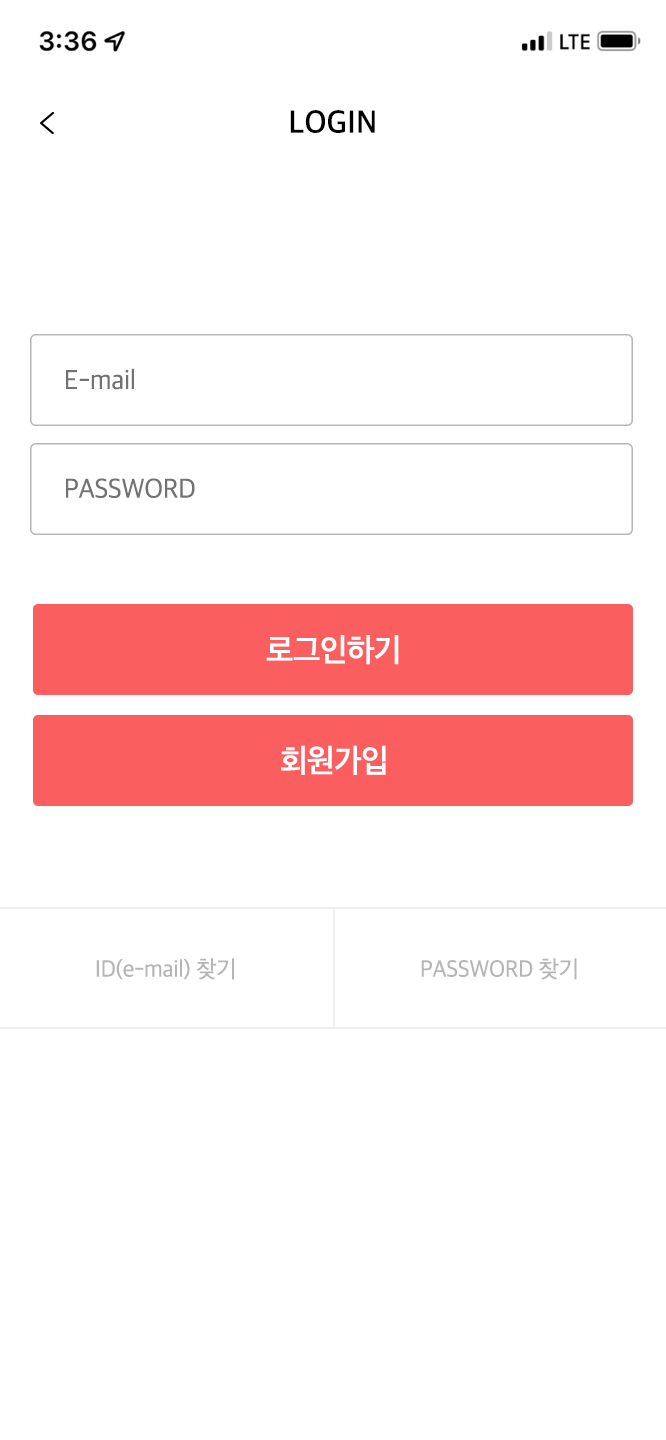
<style>
.page{position:relative;width:666px;height:1440px;background:#ffffff}
.page>*{position:absolute;margin:0}
.t1{font:32px "AppleSDGothicNeo-SemiBold";letter-spacing:0.017em;color:#000000}
.t2{font:28px "AppleSDGothicNeo-Regular";letter-spacing:-0.01em;color:#727272}
.t3{font:32.6px "AppleSDGothicNeo-SemiBold";letter-spacing:-0.01em;color:#ffffff}
.t4{font:24px "AppleSDGothicNeo-Regular";letter-spacing:-0.01em;color:#b5b5b5}
</style>
<div class="page">
<p class="t1" style="left:290px;top:110px;width:85px;height:23px">LOGIN</p>
<p class="t2" style="left:66px;top:368px;width:68px;height:22px">E-mail</p>
<p class="t2" style="left:66px;top:478px;width:129px;height:20px">PASSWORD</p>
<p class="t3" style="left:266px;top:635px;width:133px;height:30px">로그인하기</p>
<p class="t3" style="left:280px;top:745px;width:106px;height:30px">회원가입</p>
<p class="t4" style="left:96px;top:958px;width:138px;height:22px">ID(e-mail) 찾기</p>
<p class="t4" style="left:421px;top:958px;width:156px;height:22px">PASSWORD 찾기</p>
</div>
